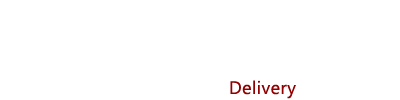
<style>
.page{position:relative;width:400px;height:100px;background:#ffffff}
.page>*{position:absolute;margin:0}
.t1{font:18px "MyanmarText";letter-spacing:0.025em;color:#8f0101}
</style>
<div class="page">
<p class="t1" style="left:230px;top:80px;width:66px;height:19px">Delivery</p>
</div>
